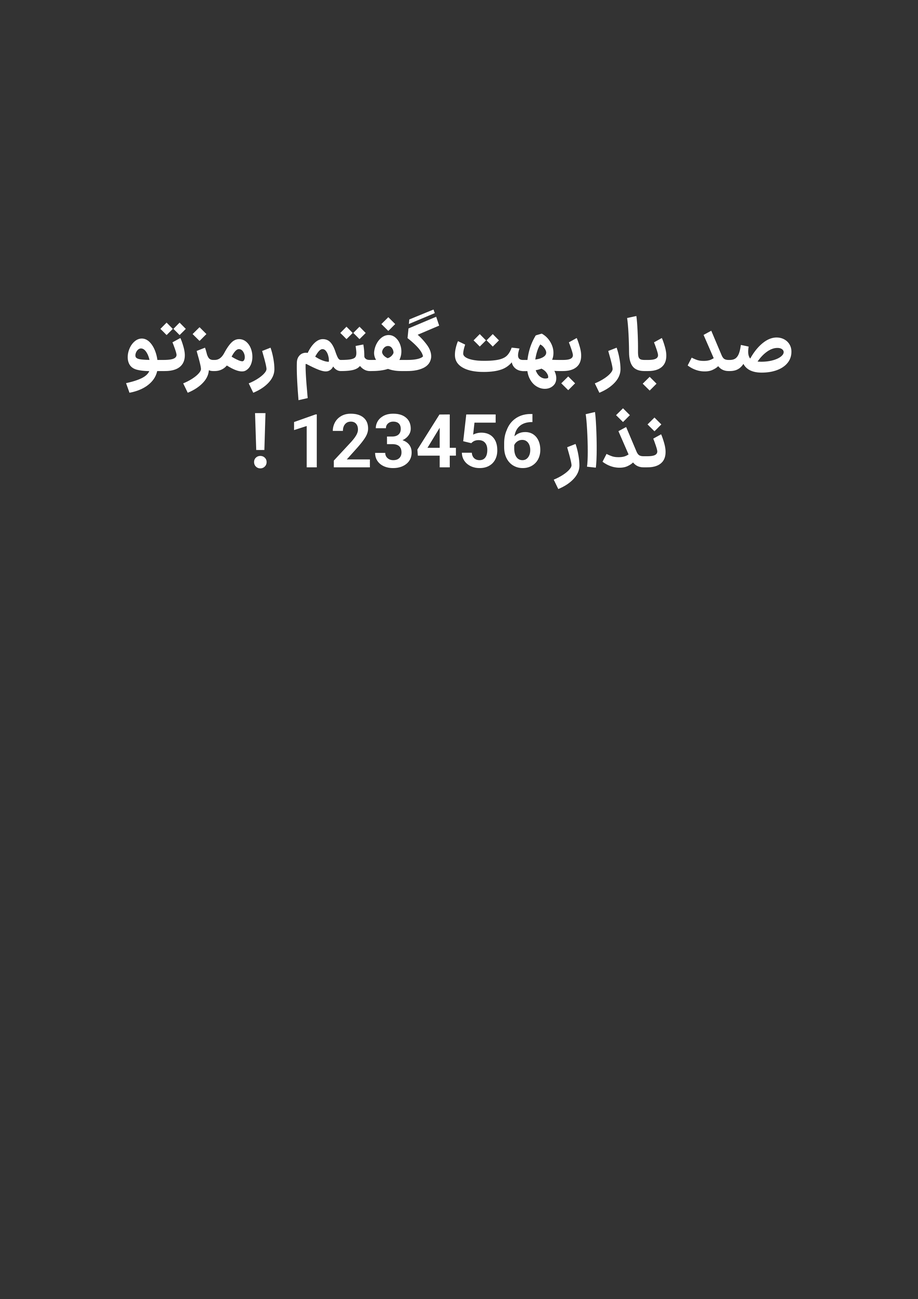
<style>
.page{position:relative;width:918px;height:1299px;background:#333333}
.page>*{position:absolute;margin:0}
.t1{font:74.3px/96.4px "IRANSansX-Bold";color:#ffffff}
</style>
<div class="page">
<p class="t1" style="left:126px;top:309px;width:666px;height:180px;text-align:center">صد بار بهت گفتم رمزتو<br>نذار 123456 !</p>
</div>
